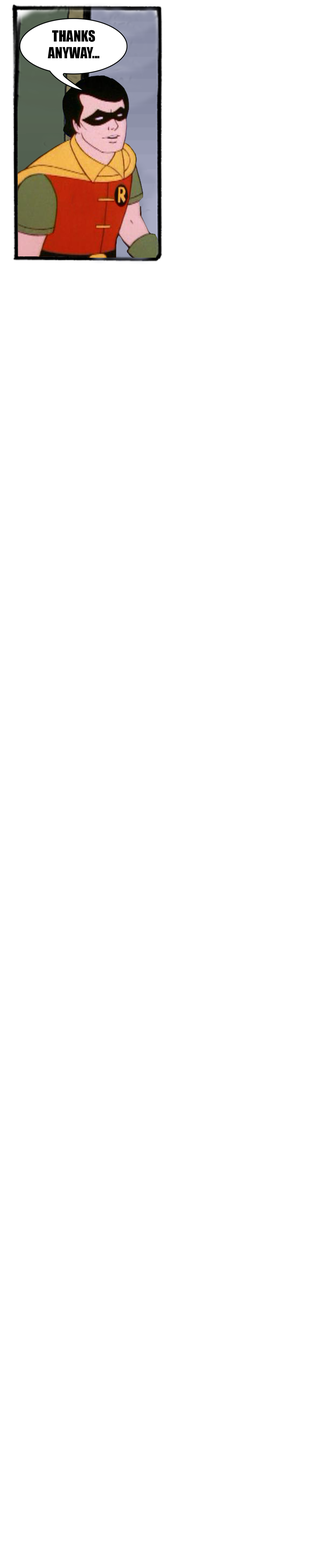
<style>
.page{position:relative;width:314px;height:1568px;background:#ffffff}
.page>*{position:absolute;margin:0}
.t1{font:14px "Impact";color:#000000}
</style>
<div class="page">
<p class="t1" style="left:48px;top:30px;width:51px;height:28px;text-align:center">THANKS<br>ANYWAY...</p>
</div>
